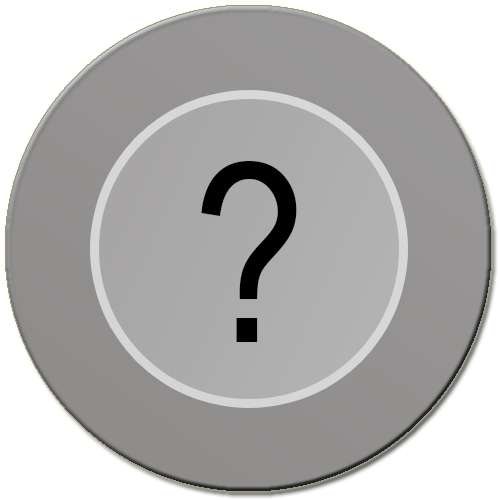
<style>
.page{position:relative;width:500px;height:500px;background:#ffffff}
.page>*{position:absolute;margin:0}
.t1{font:248px "ArialMT";color:#000000;scale:0.83 1}
.t2{font:248px "BritannicBold";color:#000000;scale:0.83 1}
</style>
<div class="page">
<p class="t1" style="left:201px;top:160px;width:96px;height:182px"><span class="t2"><br> </span>?</p>
</div>
